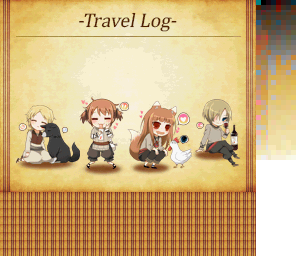
<style>
.page{position:relative;width:296px;height:256px}
.page>*{position:absolute;margin:0}
.t1{font:20px "Cambria";color:#502000;font-style:italic}
</style>
<div class="page">
<p class="t1" style="left:79px;top:12px;width:98px;height:20px">-Travel Log-</p>
</div>
